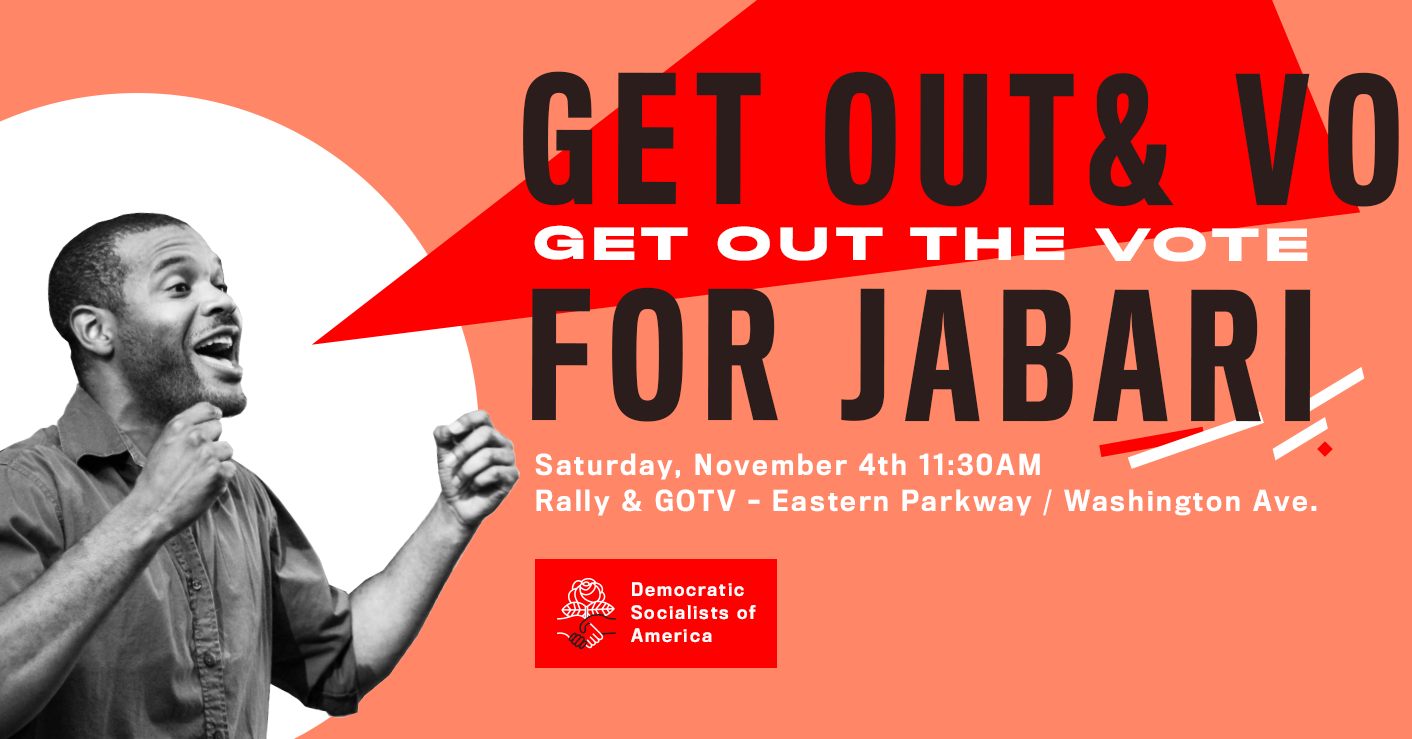
<style>
.page{position:relative;width:1412px;height:739px;background:#ff8767}
.page>*{position:absolute;margin:0}
.t1{font:41.7px "TitlingGothicFBExtended-Bold";letter-spacing:0.11em;color:#ffffff;text-transform:uppercase}
.t2{font:164.6px "TitlingGothicFBComp-Medium";letter-spacing:0.11em;color:#2c1d1d;text-transform:uppercase}
.t3{font:26.9px/35.7px "TitlingGothicFBNarrow-Medium";letter-spacing:0.11em;color:#ffffff}
.t4{font:17.3px/23px "TitlingGothicFBNarrow-Medium";letter-spacing:0.11em;color:#ffffff}
</style>
<div class="page">
<p class="t1" style="left:534px;top:225px;width:774px;height:37px">GET OUT THE VOTE</p>
<p class="t2" style="left:532px;top:287px;width:779px;height:135px">FOR JABARI</p>
<p class="t3" style="left:535px;top:453px;width:782px;height:63px">Saturday, November 4th 11:30AM<br>Rally &amp; GOTV – Eastern Parkway / Washington Ave.</p>
<p class="t4" style="left:631px;top:582px;width:125px;height:61px">Democratic<br>Socialists of<br>America</p>
</div>
